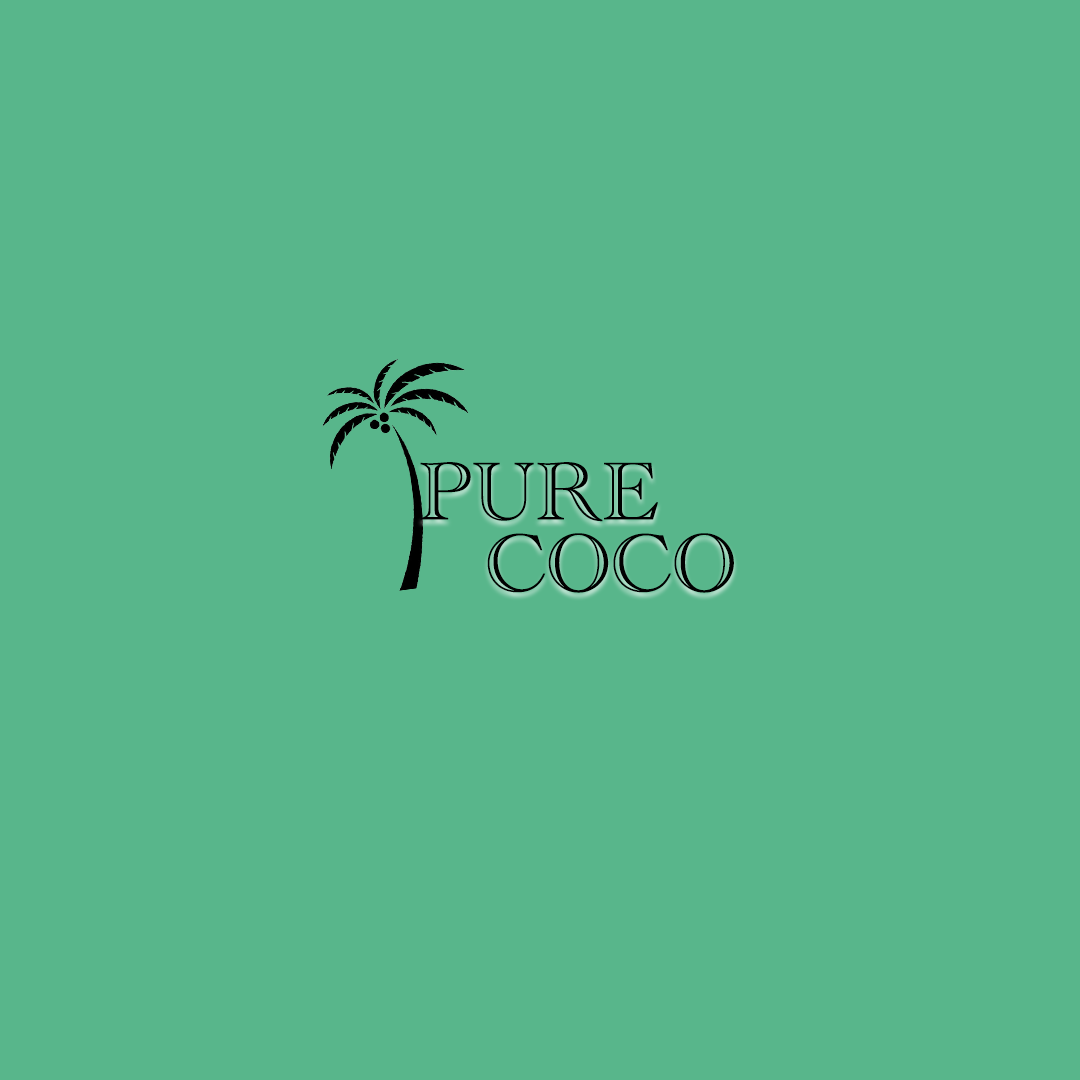
<style>
.page{position:relative;width:1080px;height:1080px;background:#58b68b}
.page>*{position:absolute;margin:0}
.t1{font:84.6px "AcademyEngravedLetPlain";color:#000000}
.t2{font:84.6px "AcademyEngravedLetPlain";color:#010101}
</style>
<div class="page">
<p class="t1" style="left:420px;top:462px;width:238px;height:60px">PURE</p>
<p class="t2" style="left:487px;top:533px;width:247px;height:60px">COCO</p>
</div>
